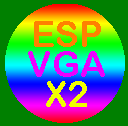
<style>
.page{position:relative;width:128px;height:126px;background:#008000}
.page>*{position:absolute;margin:0}
.t1{font:36px/30px "ArialRoundedMTBold";color:#ff8000}
.t2{font:36px/30px "ArialRoundedMTBold";color:#ea00ff}
.t3{font:36px/30px "ArialRoundedMTBold";color:#f0ff00}
</style>
<div class="page">
<p class="t1" style="left:28px;top:21px;width:77px;height:86px;text-align:center">ESP<br><span class="t2">VGA<br></span><span class="t3">X2</span></p>
</div>
